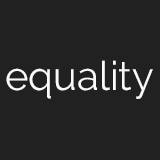
<style>
.page{position:relative;width:160px;height:160px;background:#212121}
.page>*{position:absolute;margin:0}
.t1{font:40px "Raleway-Regular";color:#fafafa}
</style>
<div class="page">
<p class="t1" style="left:6px;top:60px;width:147px;height:39px">equality</p>
</div>
